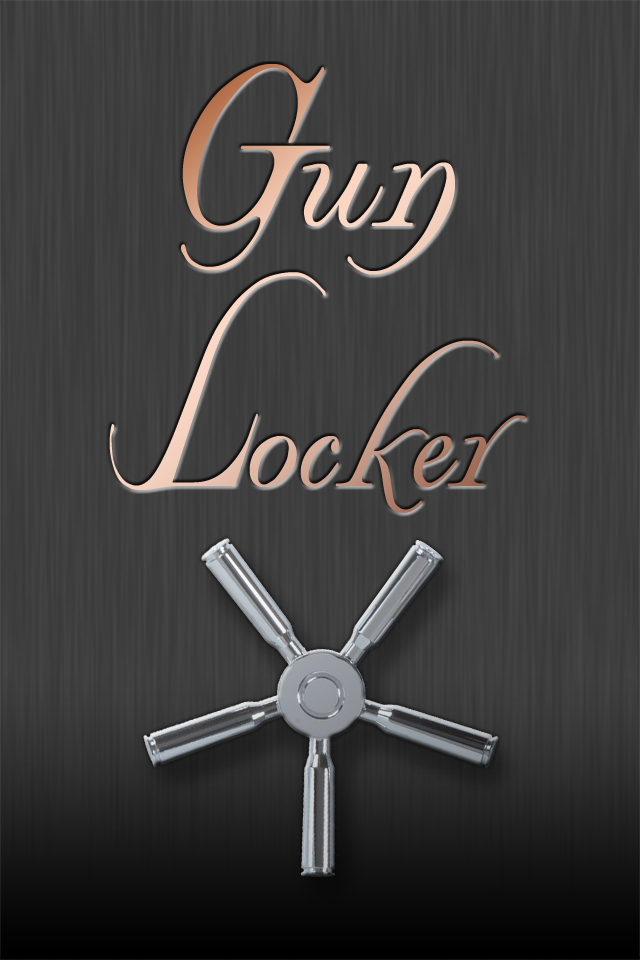
<style>
.page{position:relative;width:640px;height:960px}
.page>*{position:absolute;margin:0}
.t1{font:180px/260px "WindsorSword";scale:0.69 1}
.t2{font:256px/260px "WindsorSword";scale:0.69 1}
.t3{font:228px/260px "WindsorSword";scale:0.69 1}
.t4{font:256px/260px "WindsorSword";scale:0.49 1}
</style>
<div class="page">
<p class="t1" style="left:109px;top:64px;width:417px;height:449px;text-align:center"><span class="t2">G</span><span class="t3">un<br></span><span class="t4">L</span>ocker</p>
</div>
